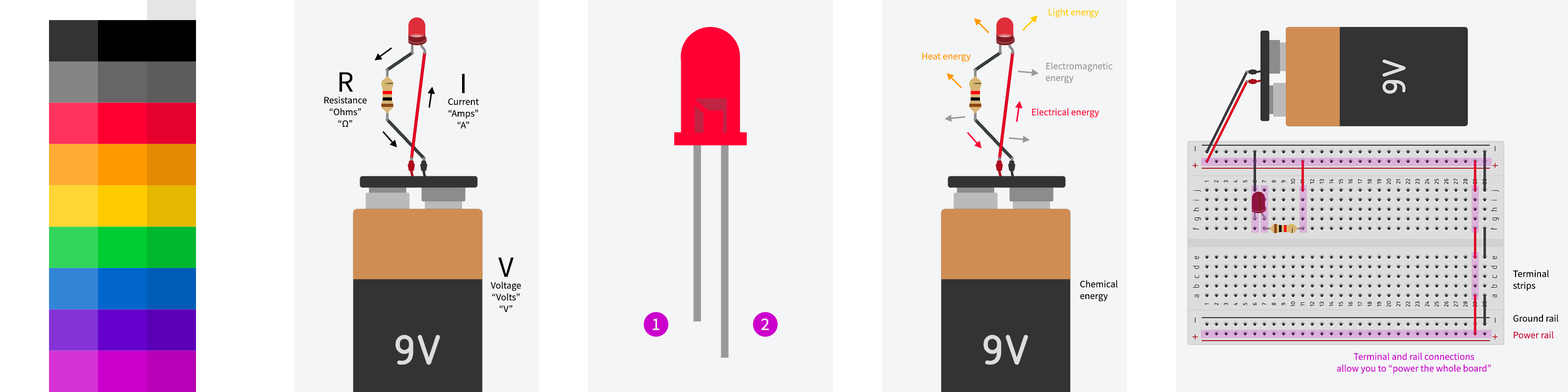
<style>
.page{position:relative;width:1568px;height:392px;background:#f4f5f6}
.page>*{position:absolute;margin:0}
.t1{font:9.8px "SourceSansPro-Regular";color:#ffcc00}
.t2{font:9.8px "SourceSansPro-Regular";color:#ff9900}
.t3{font:9.8px "SourceSansPro-Regular";color:#999999}
.t4{font:9.8px "SourceSansPro-Regular";color:#000000}
.t5{font:29.4px "SourceSansPro-Regular";color:#000000}
.t6{font:9.8px "SourceSansPro-Regular";color:#ff0033}
.t7{font:17.6px "SourceSansPro-Regular";color:#f4f5f6}
.t8{font:9.8px "SourceSansPro-Regular";color:#cc0033}
.t9{font:9.8px "SourceSansPro-Regular";color:#cc00cc}
</style>
<div class="page">
<p class="t1" style="left:1049px;top:8px;width:50px;height:10px">Light energy</p>
<p class="t2" style="left:922px;top:53px;width:49px;height:9px">Heat energy</p>
<p class="t3" style="left:1046px;top:62px;width:67px;height:21px">Electromagnetic <br>energy</p>
<p class="t4" style="left:324px;top:72px;width:43px;height:55px;text-align:center"><span class="t5">R<br></span>Resistance<br>“Ohms”<br>“Ω”</p>
<p class="t4" style="left:448px;top:74px;width:31px;height:54px;text-align:center"><span class="t5">I<br></span>Current<br>“Amps”<br>“A”</p>
<p class="t6" style="left:1032px;top:108px;width:67px;height:10px">Electrical energy</p>
<p class="t4" style="left:490px;top:257px;width:31px;height:55px;text-align:center"><span class="t5">V<br></span>Voltage<br>“Volts”<br>“V”</p>
<p class="t4" style="left:1513px;top:270px;width:36px;height:21px">Terminal<br>strips</p>
<p class="t4" style="left:1080px;top:280px;width:38px;height:21px">Chemical <br>energy</p>
<p class="t4" style="left:1513px;top:315px;width:46px;height:7px">Ground rail</p>
<p class="t7" style="left:653px;top:318px;width:7px;height:12px">1</p>
<p class="t7" style="left:761px;top:318px;width:8px;height:12px">2</p>
<p class="t8" style="left:1514px;top:331px;width:40px;height:8px">Power rail</p>
<p class="t9" style="left:1337px;top:353px;width:154px;height:21px;text-align:center">Terminal and rail connections<br>allow you to “power the whole board”</p>
</div>
